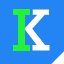
<style>
.page{position:relative;width:64px;height:64px;background:#2385f3}
.page>*{position:absolute;margin:0}
.t1{font:60px "Rockwell";letter-spacing:-0.04em}
</style>
<div class="page">
<p class="t1" style="left:13px;top:9px;width:37px;height:42px">K</p>
</div>
